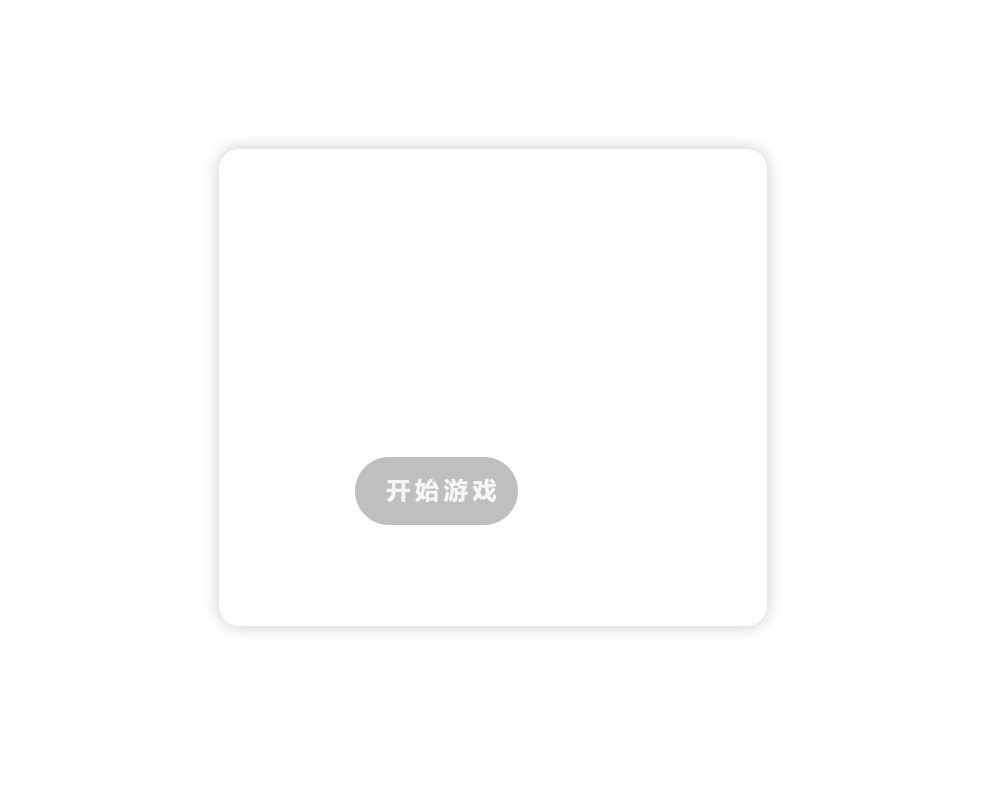
<style>
.page{position:relative;width:1000px;height:800px;background:#ffffff}
.page>*{position:absolute;margin:0}
.t1{font:24px "MicrosoftYaHei-Bold";letter-spacing:0.2em;color:#f6f6f6;text-transform:uppercase}
</style>
<div class="page">
<p class="t1" style="left:386px;top:478px;width:111px;height:25px">开始游戏</p>
</div>
